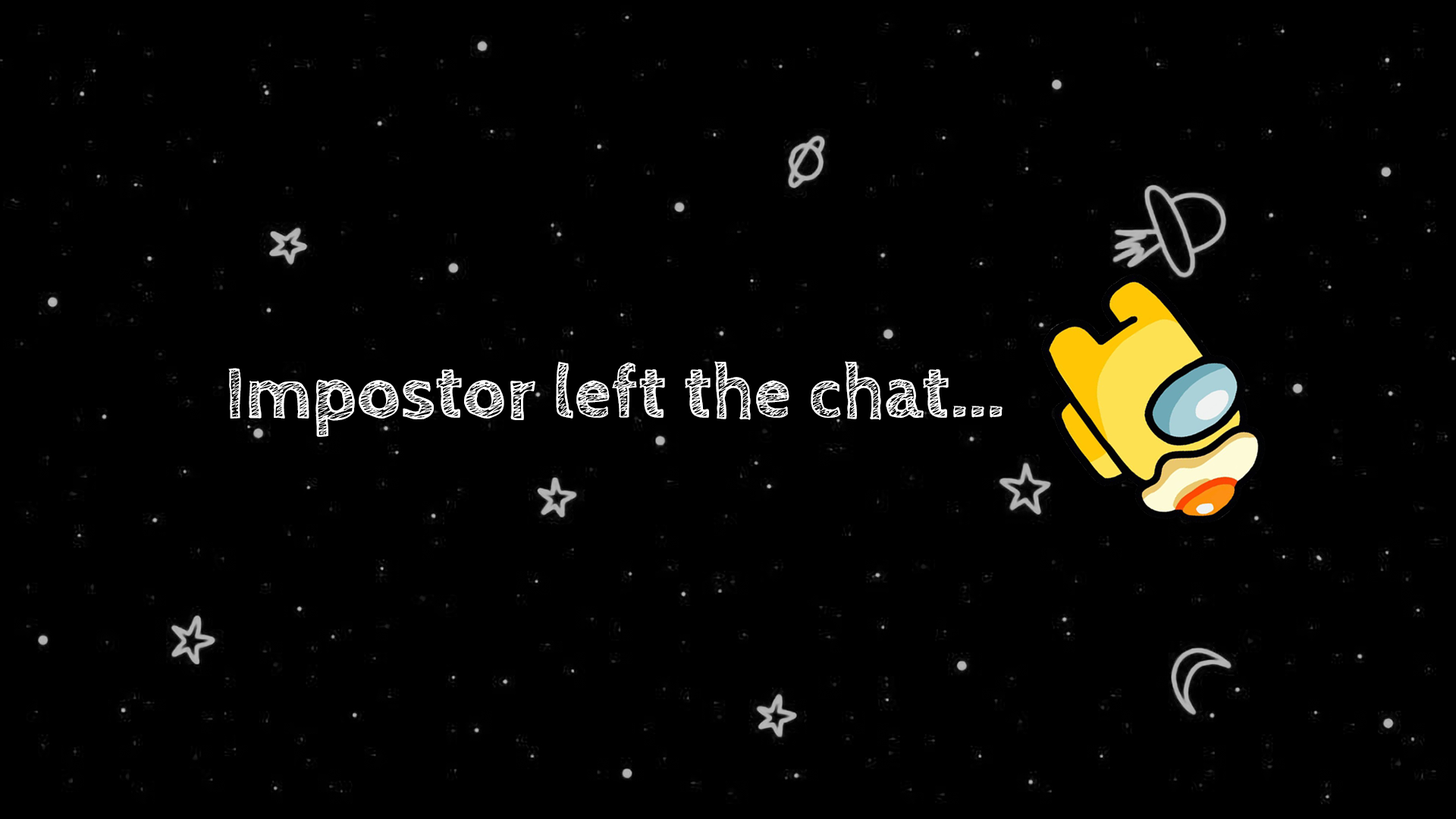
<style>
.page{position:relative;width:1456px;height:819px;background:#000000}
.page>*{position:absolute;margin:0}
.t1{font:75.8px "CabinSketch-Bold";color:#ffffff}
</style>
<div class="page">
<p class="t1" style="left:228px;top:361px;width:775px;height:76px">Impostor left the chat...</p>
</div>
